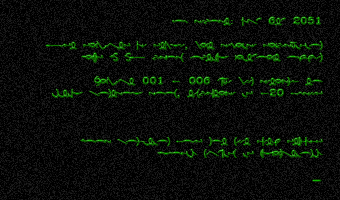
<style>
.page{position:relative;width:340px;height:200px;background:#000000}
.page>*{position:absolute;margin:0}
.t1{font:10px "SWMeteo";scale:1.19 1}
</style>
<div class="page">
<p class="t1" style="left:46px;top:17px;width:277px;height:164px;text-align:right">Log report: March 6th 2051<br><br>Test subjects are stable, but require supervision<br>Humans DO NOT perform optimal without oxygen<br><br>Subject 001 - 006 have been returned to<br>initial control room, temperature is -20 degrees<br><br><br><br>Door condition does not meet safety standards<br>Closing mechanism is malfunctioning<br><br>_</p>
</div>
